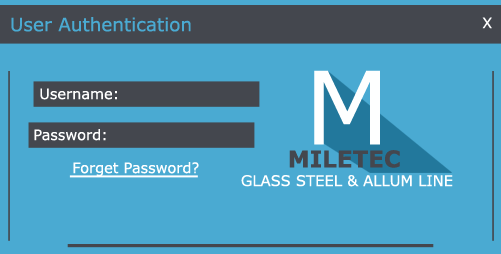
<style>
.page{position:relative;width:501px;height:254px;background:#4aaad2}
.page>*{position:absolute;margin:0}
.t1{font:18.4px "Verdana";color:#4aaad2}
.t2{font:14.4px "Verdana";color:#ffffff}
.t3{font:101.1px "Verdana";color:#feffff}
.t4{font:23px "Verdana-Bold";color:#44474e}
.t5{font:14.8px "Verdana";color:#ffffff}
</style>
<div class="page">
<p class="t1" style="left:11px;top:17px;width:180px;height:15px">User Authentication</p>
<p class="t2" style="left:482px;top:17px;width:10px;height:12px">X</p>
<p class="t3" style="left:314px;top:70px;width:66px;height:75px">M</p>
<p class="t2" style="left:40px;top:88px;width:77px;height:12px">Username:</p>
<p class="t2" style="left:34px;top:129px;width:72px;height:12px">Password:</p>
<p class="t4" style="left:289px;top:150px;width:111px;height:18px">MILETEC</p>
<p class="t2" style="left:73px;top:162px;width:126px;height:15px">Forget Password?</p>
<p class="t5" style="left:241px;top:175px;width:212px;height:12px">GLASS STEEL &amp; ALLUM LINE</p>
</div>
